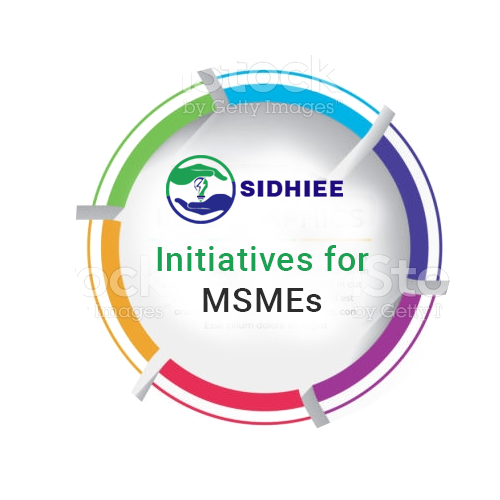
<style>
.page{position:relative;width:500px;height:500px;background:#ffffff}
.page>*{position:absolute;margin:0}
.t1{font:34.5px "Roboto-Medium";letter-spacing:0.025em;color:#1da054}
.t2{font:34.5px "Roboto-Medium";letter-spacing:0.025em;color:#2c2c2c}
</style>
<div class="page">
<p class="t1" style="left:157px;top:245px;width:212px;height:67px;text-align:center">Initiatives for<br><span class="t2">MSMEs</span></p>
</div>
